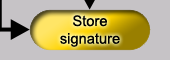
<style>
.page{position:relative;width:170px;height:60px;background:#c6c3c6}
.page>*{position:absolute;margin:0}
.t1{font:14.7px "ArialMT";color:#000000}
</style>
<div class="page">
<p class="t1" style="left:60px;top:15px;width:60px;height:32px;text-align:center">Store<br>signature</p>
</div>
